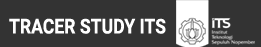
<style>
.page{position:relative;width:261px;height:47px;background:#333333}
.page>*{position:absolute;margin:0}
.t1{font:20.4px "Roboto-Bold";color:#ffffff;scale:0.86 1}
</style>
<div class="page">
<p class="t1" style="left:9px;top:18px;width:157px;height:16px">TRACER STUDY ITS</p>
</div>
